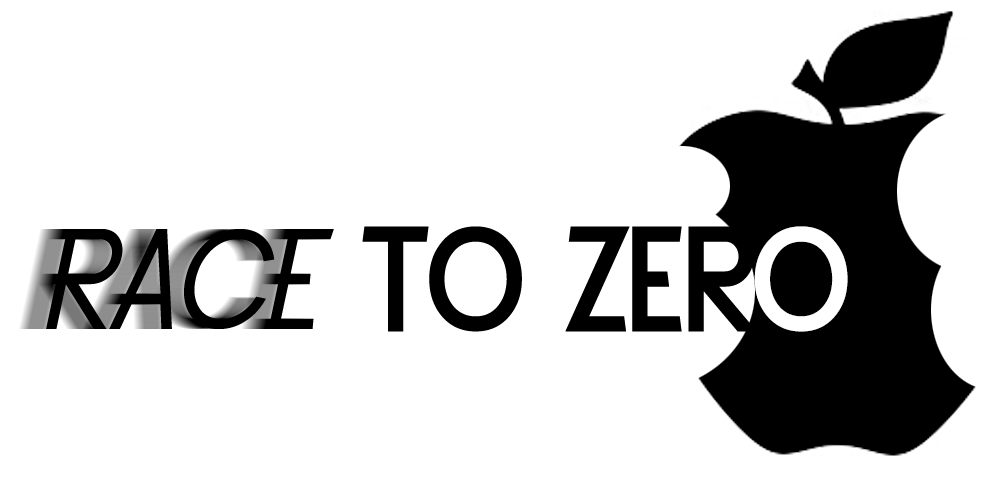
<style>
.page{position:relative;width:1000px;height:500px;background:#ffffff}
.page>*{position:absolute;margin:0}
.t1{font:150px "SFButtacupLettering-Bold";color:#000000}
.t2{font:150px "SFButtacupLettering-Oblique";color:#000000}
.t3{font:150px "SFButtacupLettering-Bold";color:#ffffff}
</style>
<div class="page">
<p class="t1" style="left:46px;top:226px;width:802px;height:106px"><span class="t2">Race</span> to Zer<span class="t3">o</span></p>
</div>
